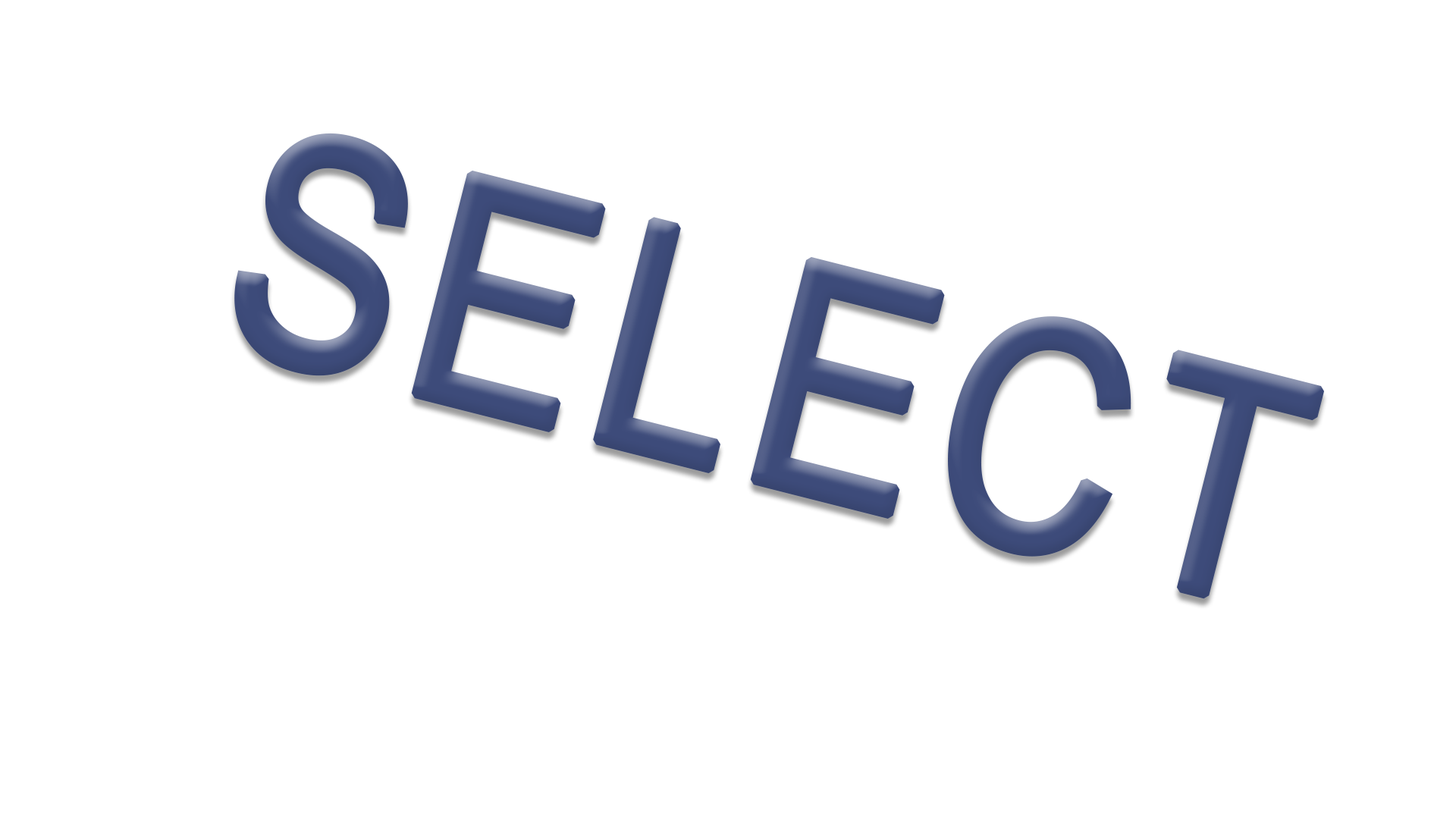
<style>
.page{position:relative;width:1456px;height:819px;background:#ffffff}
.page>*{position:absolute;margin:0}
.t1{font:316px "ArialNarrow";letter-spacing:0.025em;color:#3d4b7a;font-weight:bold}
</style>
<div class="page">
<p class="t1" style="left:234px;top:133px;width:1090px;height:466px;rotate:14deg">SELECT</p>
</div>
